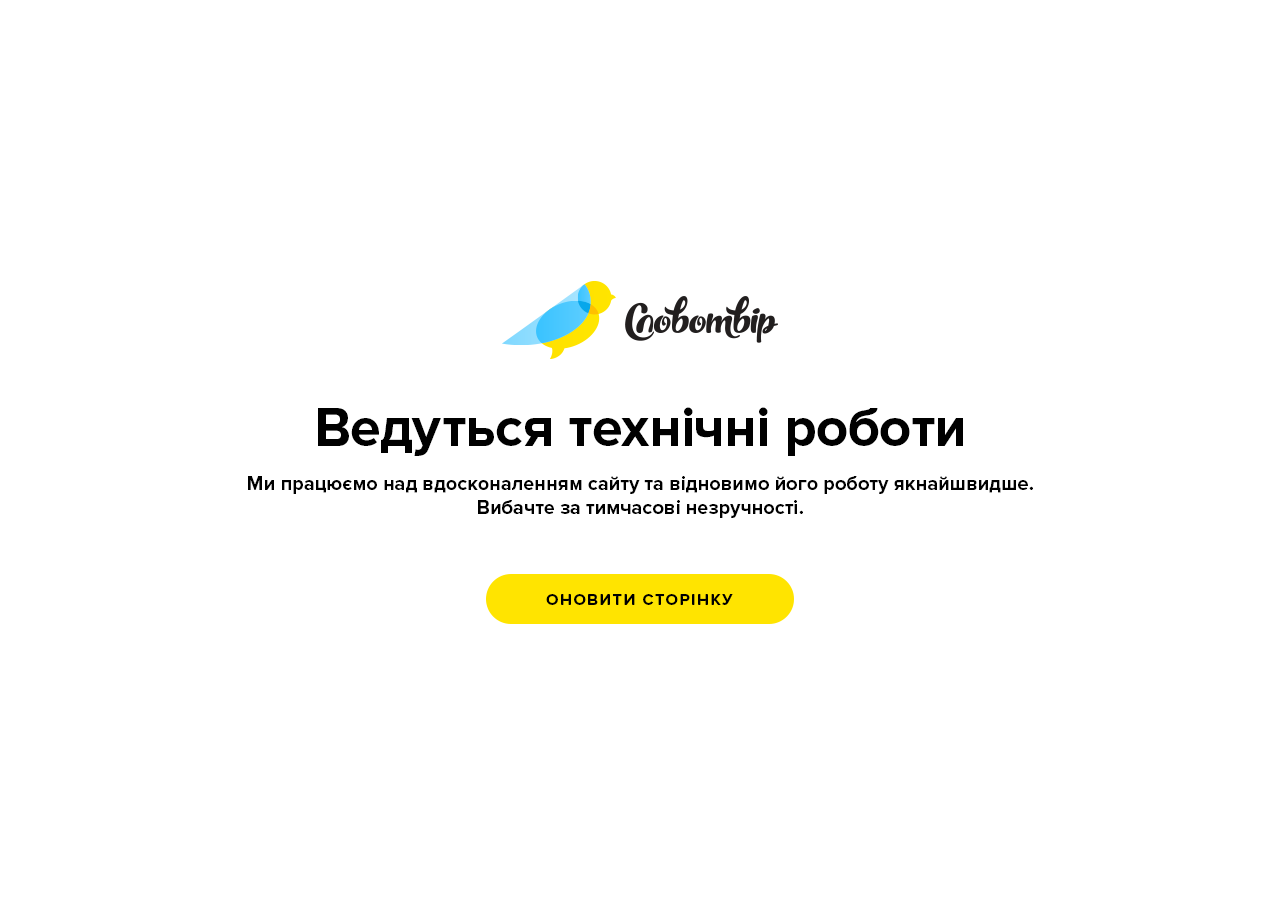
<style>
.page{position:relative;width:1280px;height:900px;background:#ffffff}
.page>*{position:absolute;margin:0}
.t1{font:56px "ProximaNova-Bold";color:#000000}
.t2{font:20px "ProximaNova-Bold";color:#000000}
.t3{font:16px "ProximaNova-Bold";letter-spacing:0.1em;color:#000000;text-transform:uppercase}
</style>
<div class="page">
<p class="t1" style="left:318px;top:407px;width:645px;height:49px">Ведуться технічні роботи</p>
<p class="t2" style="left:248px;top:476px;width:785px;height:42px;text-align:center">Ми працюємо над вдосконаленням сайту та відновимо його роботу якнайшвидше.<br>Вибачте за тимчасові незручності.</p>
<p class="t3" style="left:546px;top:594px;width:187px;height:11px">Оновити сторінку</p>
</div>
